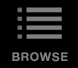
<style>
.page{position:relative;width:78px;height:68px;background:#000000}
.page>*{position:absolute;margin:0}
.t1{font:12.1px "AlteHaasGrotesk_Bold";letter-spacing:0.05em;color:#808080}
</style>
<div class="page">
<p class="t1" style="left:12px;top:52px;width:56px;height:10px">BROWSE</p>
</div>
